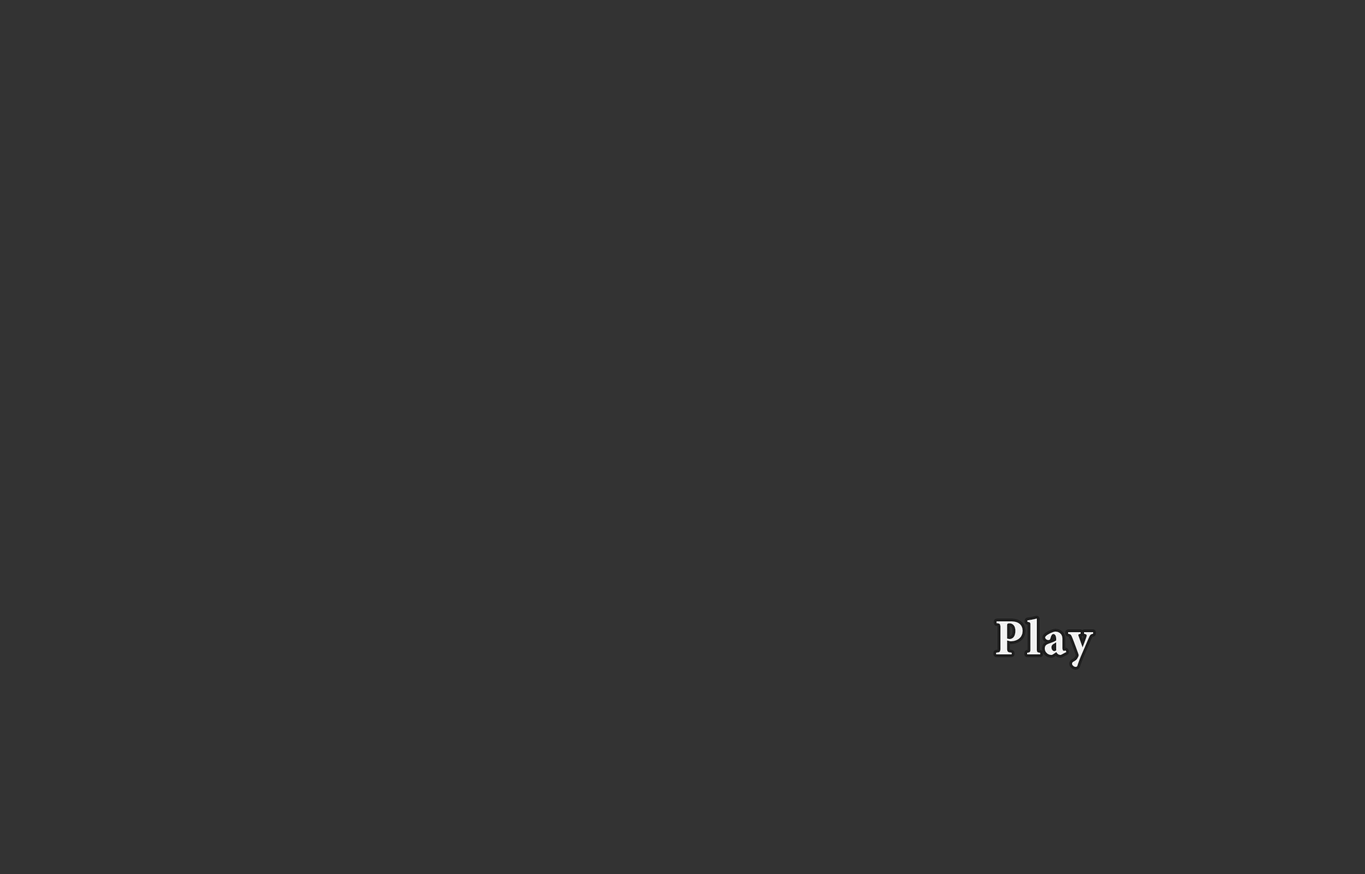
<style>
.page{position:relative;width:1365px;height:874px;background:#333333}
.page>*{position:absolute;margin:0}
.t1{font:50.6px "MinionPro-Bold";letter-spacing:0.05em;color:#f2f2f2}
</style>
<div class="page">
<p class="t1" style="left:996px;top:618px;width:97px;height:49px">Play</p>
</div>
